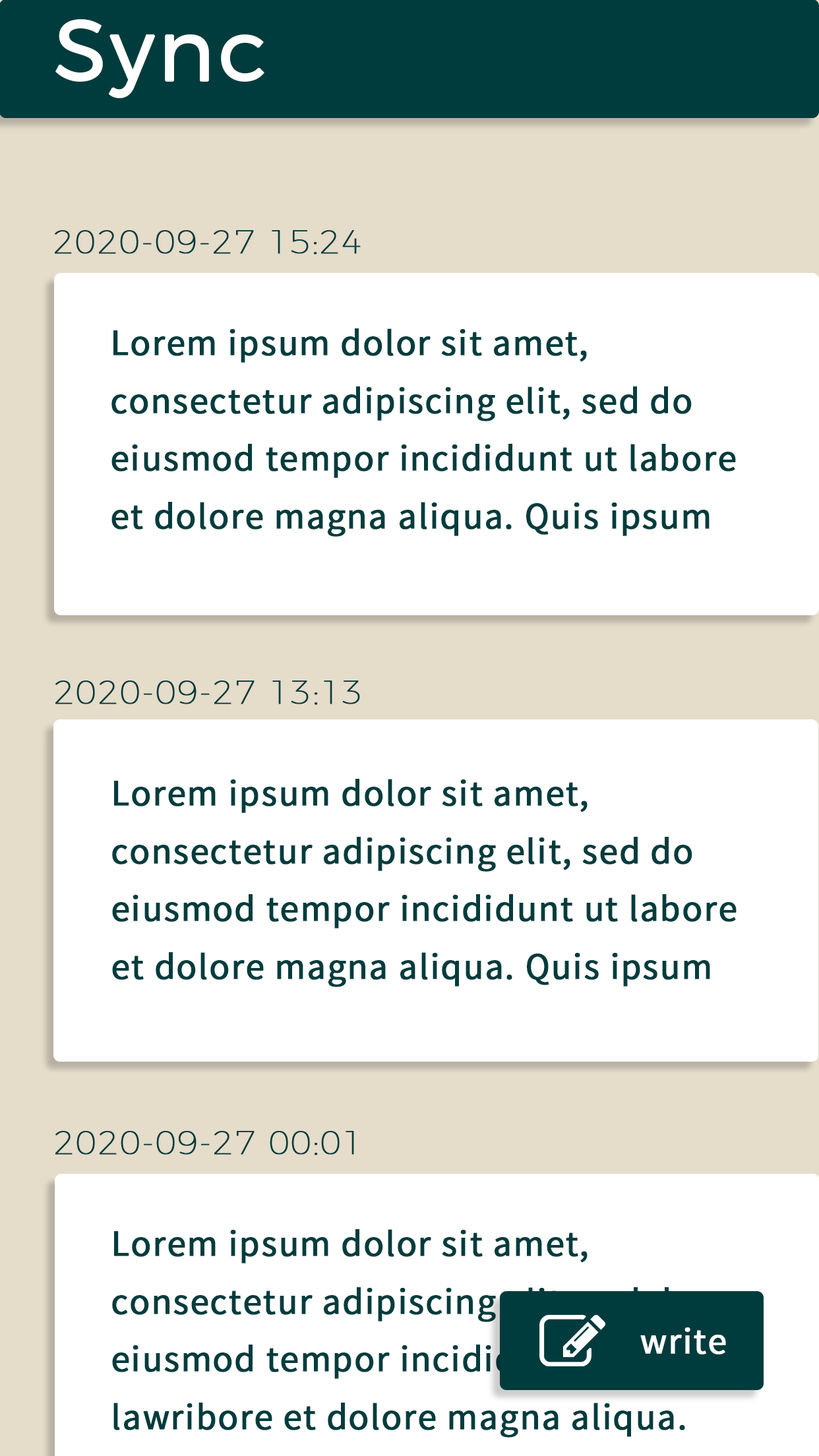
<style>
.page{position:relative;width:819px;height:1456px;background:#ffffff}
.page>*{position:absolute;margin:0}
.t1{font:85.7px "Montserrat-Light";letter-spacing:0.025em;color:#ffffff;font-weight:bold}
.t2{font:33px "Montserrat-Thin";letter-spacing:0.025em;color:#003c3d;font-weight:bold}
.t3{font:33px "NotoSansCJKjp-Regular";letter-spacing:0.025em;color:#003c3d;font-weight:bold}
.t4{font:33px "NotoSansCJKjp-Regular";letter-spacing:0.025em;color:#ffffff;font-weight:bold}
</style>
<div class="page">
<p class="t1" style="left:55px;top:19px;width:209px;height:79px">Sync</p>
<p class="t2" style="left:55px;top:230px;width:306px;height:25px">2020-09-27 15:24</p>
<p class="t3" style="left:111px;top:328px;width:625px;height:209px">Lorem ipsum dolor sit amet, consectetur adipiscing elit, sed do eiusmod tempor incididunt ut labore et dolore magna aliqua. Quis ipsum suspendisse ultrices gravida. Risus commodo viverra maecenas accumsan lacus vel facilisis.</p>
<p class="t2" style="left:55px;top:681px;width:305px;height:24px">2020-09-27 13:13</p>
<p class="t3" style="left:112px;top:779px;width:625px;height:208px">Lorem ipsum dolor sit amet, consectetur adipiscing elit, sed do eiusmod tempor incididunt ut labore et dolore magna aliqua. Quis ipsum suspendisse ultrices gravida. Risus commodo viverra maecenas accumsan lacus vel facilisis.</p>
<p class="t2" style="left:55px;top:1131px;width:299px;height:24px">2020-09-27 00:01</p>
<p class="t3" style="left:112px;top:1229px;width:580px;height:209px">Lorem ipsum dolor sit amet, consectetur adipiscing elit, sed do eiusmod tempor incididunt ut lawribore et dolore magna aliqua. Quis ipsum suspendisse ultrices gravida. Risus commodo viverra maecenas accumsan lacus vel facilisis.</p>
<p class="t4" style="left:640px;top:1327px;width:86px;height:27px">write</p>
</div>
